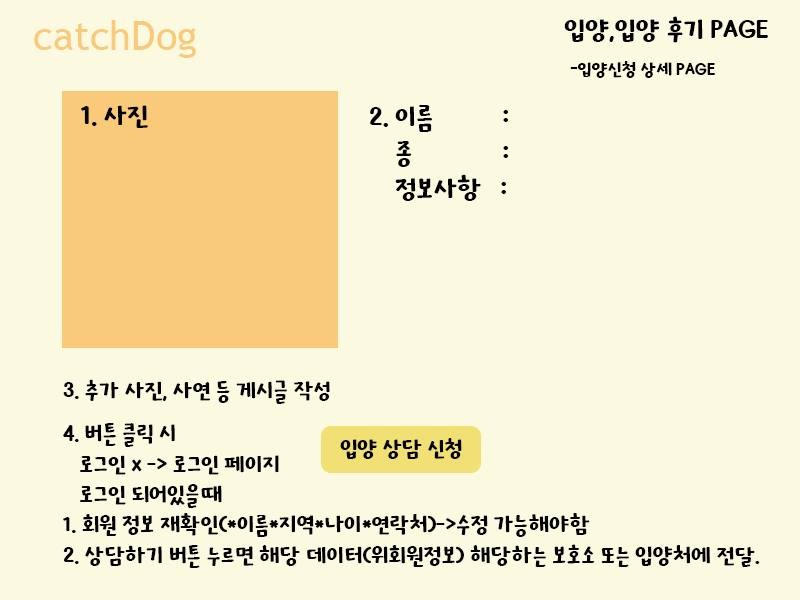
<style>
.page{position:relative;width:800px;height:600px;background:#fcf9e1}
.page>*{position:absolute;margin:0}
.t1{font:29.8px "KOTRA-HOPE";color:#000000}
.t2{font:20px "KOTRA-HOPE";color:#000000}
.t3{font:40px "TrebuchetMS";color:#f9ca79}
.t4{font:29.9px "KOTRA-HOPE";color:#000000}
.t5{font:25px "KOTRA-HOPE";color:#000000}
.t6{font:25.4px "KOTRA-HOPE";color:#000000}
.t7{font:24.8px "KOTRA-HOPE";color:#000000}
</style>
<div class="page">
<p class="t1" style="left:564px;top:16px;width:204px;height:62px">입양,입양 후기 PAGE<br> <span class="t2">-입양신청 상세 PAGE</span></p>
<p class="t3" style="left:34px;top:20px;width:162px;height:38px">catchDog</p>
<p class="t1" style="left:81px;top:105px;width:67px;height:23px">1. 사진</p>
<p class="t4" style="left:370px;top:105px;width:138px;height:96px">2. 이름      :<br>    종      :<br>    정보사항   :</p>
<p class="t5" style="left:63px;top:379px;width:267px;height:25px">3. 추가 사진, 사연 등 게시글 작성</p>
<p class="t6" style="left:63px;top:423px;width:697px;height:145px">4. 버튼 클릭 시  <br>   로그인 x -&gt; 로그인 페이지<br>   로그인 되어있을때<br>1. 회원 정보 재확인(*이름*지역*나이*연락처)-&gt;수정 가능해야함<br>2. 상담하기 버튼 누르면 해당 데이터(위회원정보) 해당하는 보호소 또는 입양처에 전달.</p>
<p class="t7" style="left:340px;top:438px;width:122px;height:21px">입양 상담 신청</p>
</div>
